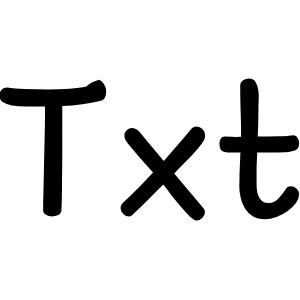
<style>
.page{position:relative;width:300px;height:300px;background:#ffffff}
.page>*{position:absolute;margin:0}
.t1{font:233px "GamjaFlower-Regular";color:#000000}
</style>
<div class="page">
<p class="t1" style="left:0px;top:78px;width:300px;height:143px">Txt</p>
</div>
